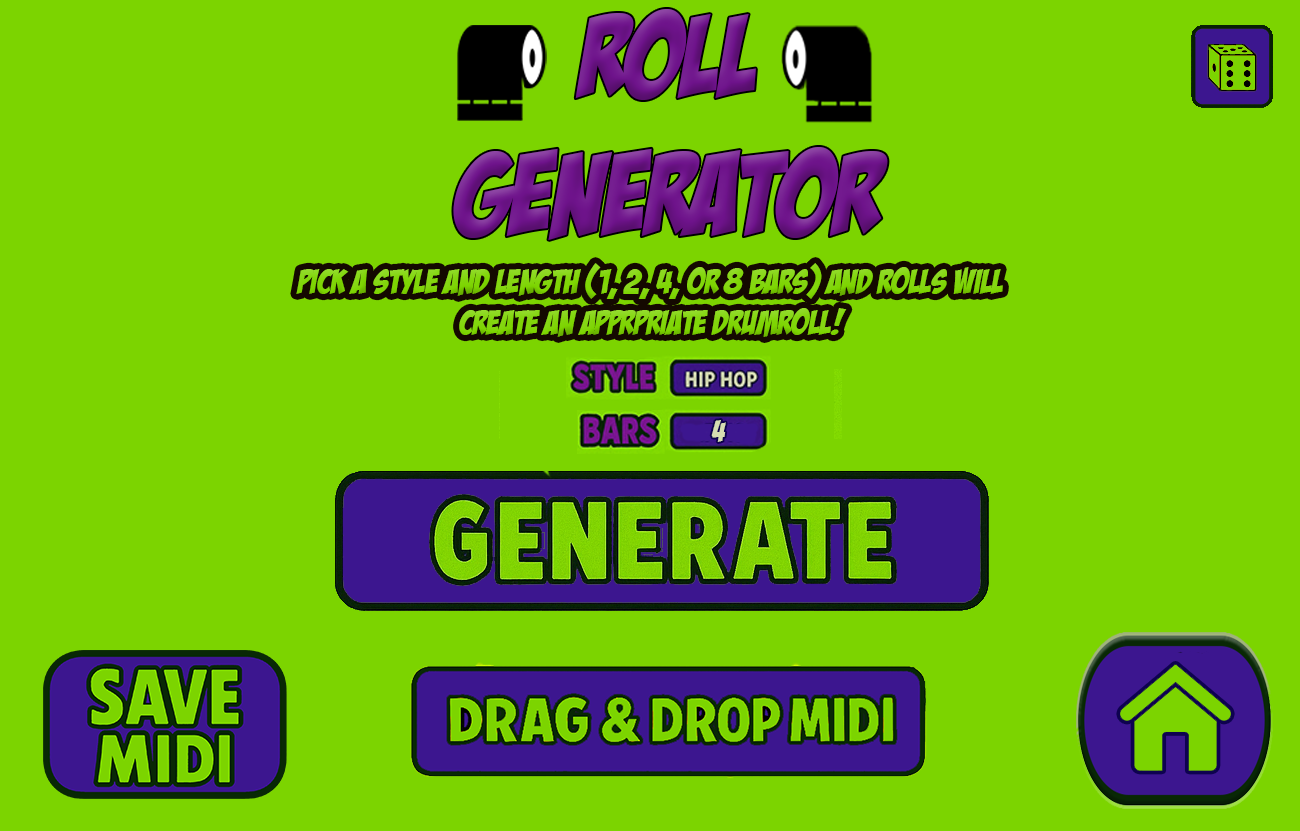
<style>
.page{position:relative;width:1300px;height:831px;background:#7cd400}
.page>*{position:absolute;margin:0}
.t1{font:34.7px "BadaBoomBB";color:#7cd400}
.t2{font:29.6px "BadaBoomBB";color:#d6ddb2}
</style>
<div class="page">
<p class="t1" style="left:296px;top:263px;width:707px;height:74px;text-align:center">pick a STyle AND LENGTH (1, 2, 4, or 8 BARS) and ROLLS WILL<br>CREATE AN APPRPRIATE DRUMROLL!</p>
<p class="t2" style="left:711px;top:420px;width:15px;height:22px">4</p>
</div>
